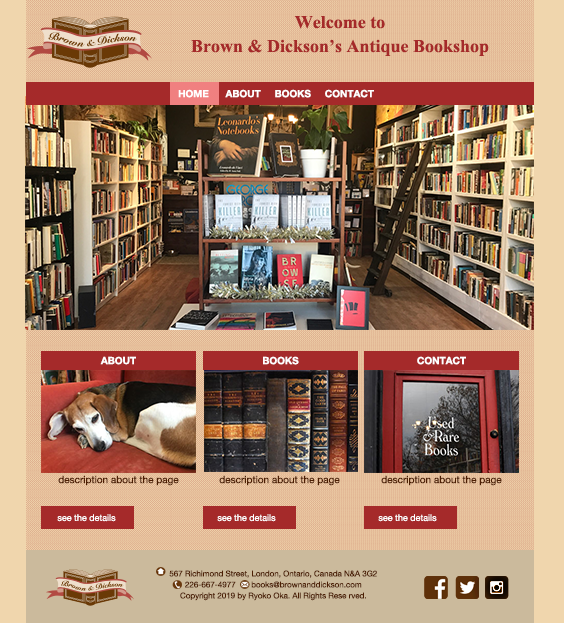
<style>
.page{position:relative;width:564px;height:623px}
.page>*{position:absolute;margin:0}
.t1{font:18px/24px "TimesNewRomanPS-BoldMT";color:#a52a2a}
.t2{font:10px "HelveticaNeue-Bold";color:#ffffff}
.t3{font:10px "HelveticaNeue-Bold";color:#cbba9c}
.t4{font:10px "HelveticaNeue";color:#4d1f03}
.t5{font:9px "HelveticaNeue";color:#ffffff}
.t6{font:8px/11px "HelveticaNeue";color:#4d1f03}
</style>
<div class="page">
<p class="t1" style="left:191px;top:16px;width:298px;height:40px;text-align:center">Welcome to<br>Brown &amp; Dickson’s Antique Bookshop</p>
<p class="t2" style="left:178px;top:89px;width:196px;height:9px">HOME      <span class="t3">ABOUT</span>     BOOKS     CONTACT</p>
<p class="t2" style="left:178px;top:89px;width:196px;height:9px">HOME      ABOUT     BOOKS     CONTACT</p>
<p class="t2" style="left:100px;top:356px;width:36px;height:9px">ABOUT</p>
<p class="t2" style="left:263px;top:356px;width:36px;height:9px">BOOKS</p>
<p class="t2" style="left:417px;top:356px;width:49px;height:9px">CONTACT</p>
<p class="t4" style="left:58px;top:475px;width:121px;height:11px">description about the page</p>
<p class="t4" style="left:219px;top:475px;width:121px;height:11px">description about the page</p>
<p class="t4" style="left:381px;top:475px;width:121px;height:11px">description about the page</p>
<p class="t5" style="left:57px;top:514px;width:59px;height:8px">see the details</p>
<p class="t5" style="left:217px;top:514px;width:59px;height:8px">see the details</p>
<p class="t5" style="left:378px;top:514px;width:59px;height:8px">see the details</p>
<p class="t6" style="left:169px;top:570px;width:208px;height:31px;text-align:center">567 Richimond Street, London, Ontario, Canada N&amp;A 3G2<br>226-667-4977       books@brownanddickson.com<br>Copyright 2019 by Ryoko Oka. All Rights Rese rved.</p>
</div>
